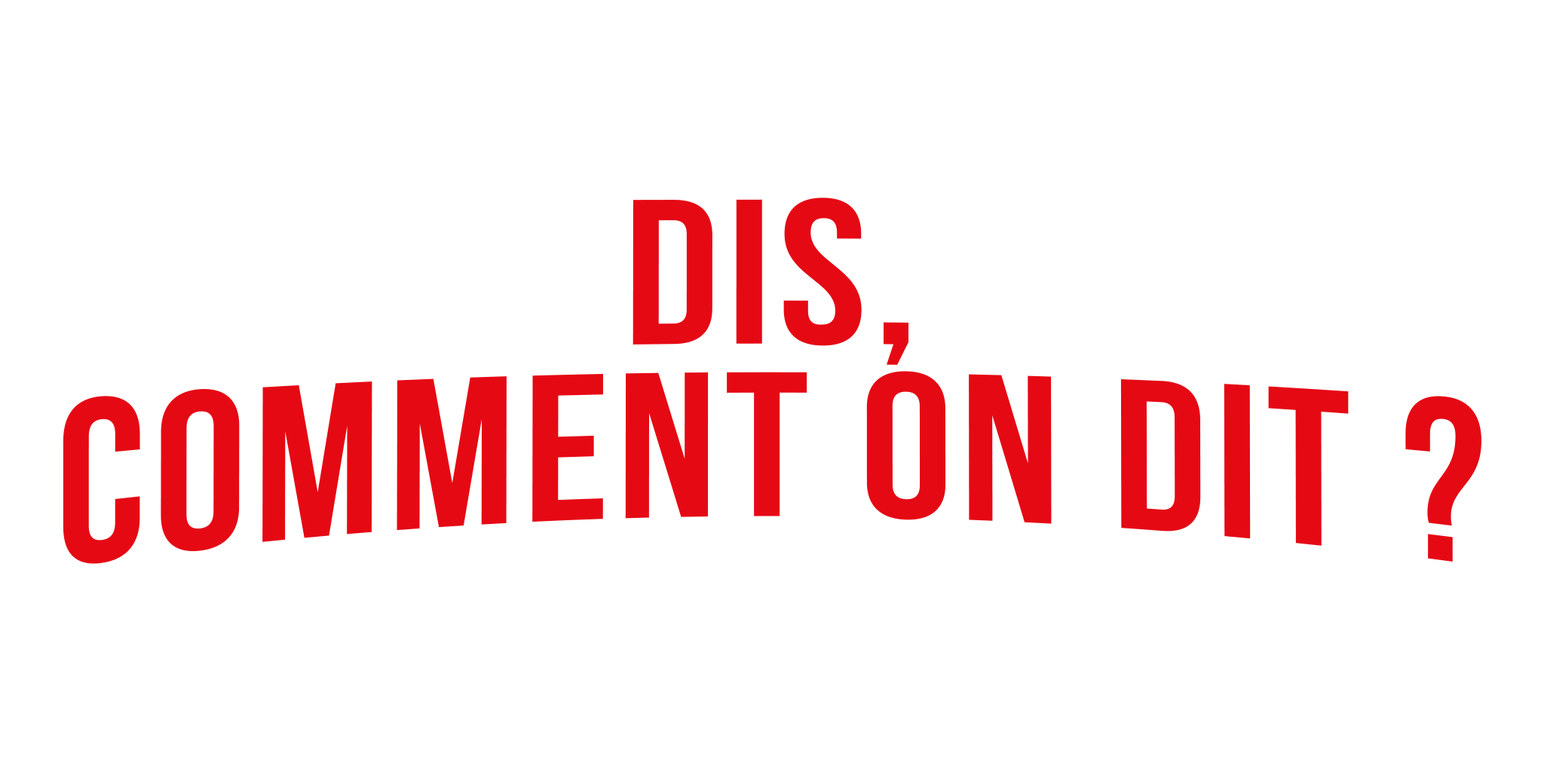
<style>
.page{position:relative;width:1544px;height:772px;background:#ffffff}
.page>*{position:absolute;margin:0}
.t1{font:235.6px/197.9px "BebasNeueBold";letter-spacing:0.03em;color:#e50914}
</style>
<div class="page">
<p class="t1" style="left:63px;top:198px;width:1419px;height:366px;text-align:center">dis,<br>comment on dit ?</p>
</div>
